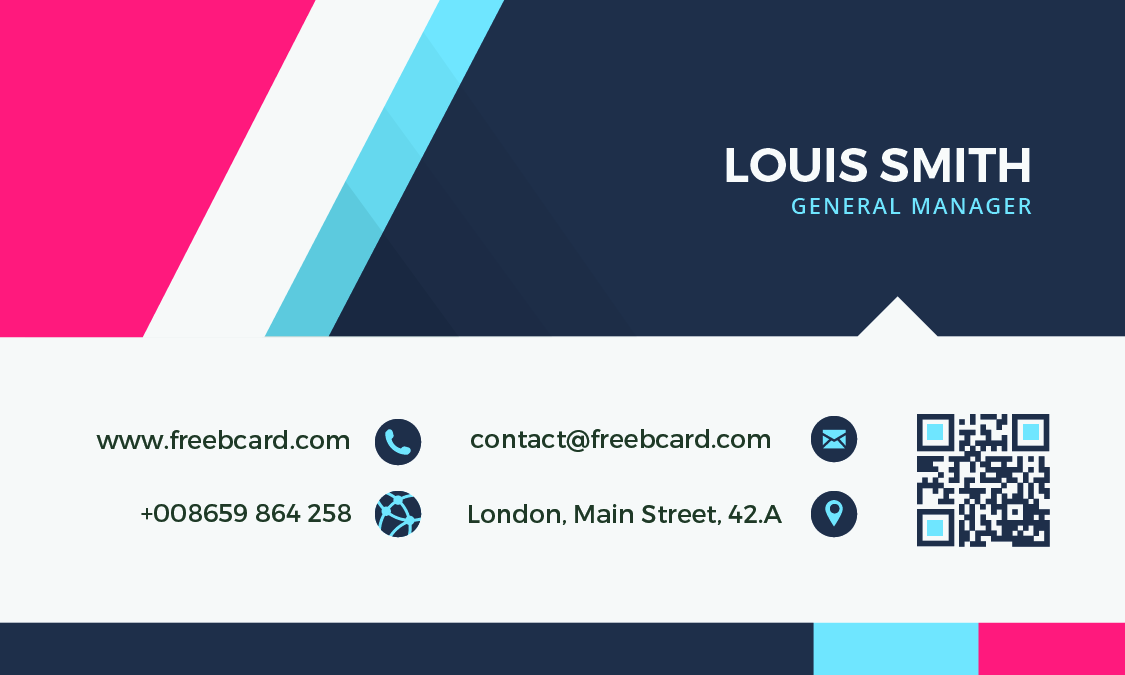
<style>
.page{position:relative;width:1125px;height:675px;background:#f6f9f9}
.page>*{position:absolute;margin:0}
.t1{font:47.4px "Montserrat-SemiBold";color:#f8fbfb;text-transform:uppercase}
.t2{font:21.7px "OpenSans-Semibold";letter-spacing:0.1em;color:#6fe6ff}
.t3{font:25px "Montserrat-Regular";color:#1e3826}
</style>
<div class="page">
<p class="t1" style="left:726px;top:148px;width:304px;height:34px">Louis Smith</p>
<p class="t2" style="left:792px;top:198px;width:240px;height:16px">GENERAL MANAGER</p>
<p class="t3" style="left:96px;top:430px;width:253px;height:19px">www.freebcard.com</p>
<p class="t3" style="left:471px;top:429px;width:299px;height:23px">contact@freebcard.com</p>
<p class="t3" style="left:141px;top:504px;width:210px;height:18px">+008659 864 258</p>
<p class="t3" style="left:469px;top:504px;width:313px;height:21px">London, Main Street, 42.A</p>
</div>
